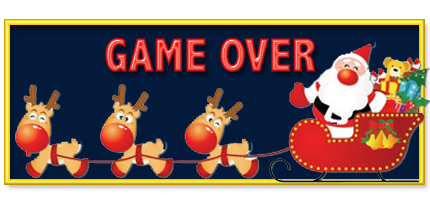
<style>
.page{position:relative;width:430px;height:205px;background:#031a3b}
.page>*{position:absolute;margin:0}
.t1{font:48px "AbadiMT-CondensedExtraBold"}
</style>
<div class="page">
<p class="t1" style="left:105px;top:38px;width:211px;height:34px">GAME OVER</p>
</div>
